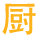
<style>
.page{position:relative;width:38px;height:38px;background:#ffffff}
.page>*{position:absolute;margin:0}
.t1{font:36px "STHeiti";color:#ffb31a}
</style>
<div class="page">
<p class="t1" style="left:2px;top:3px;width:34px;height:32px">厨</p>
</div>
